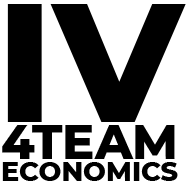
<style>
.page{position:relative;width:186px;height:186px;background:#ffffff}
.page>*{position:absolute;margin:0}
.t1{font:27px/22px "Montserrat-ExtraBold";color:#000000}
.t2{font:168.3px/40px "Montserrat-ExtraBold";color:#000000}
.t3{font:48px/37px "Montserrat-ExtraBold";color:#000000}
</style>
<div class="page">
<p class="t1" style="left:2px;top:4px;width:184px;height:177px;text-align:center"><span class="t2">IV<br></span><span class="t3">4TEAM<br></span>ECONOMICS</p>
</div>
